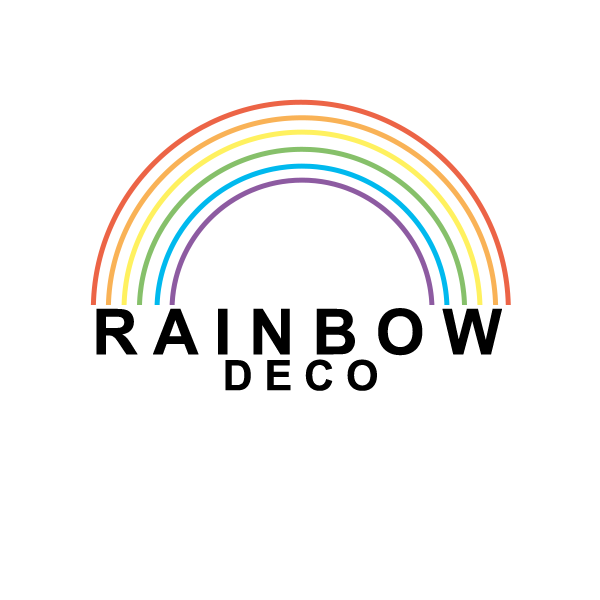
<style>
.page{position:relative;width:600px;height:600px;background:#ffffff}
.page>*{position:absolute;margin:0}
.t1{font:63.2px "Arial-BoldMT";color:#000000}
.t2{font:41.9px "Arial-BoldMT";color:#000000}
</style>
<div class="page">
<p class="t1" style="left:96px;top:308px;width:406px;height:48px">R A I N B O W</p>
<p class="t2" style="left:225px;top:359px;width:152px;height:32px">D E C O</p>
</div>
